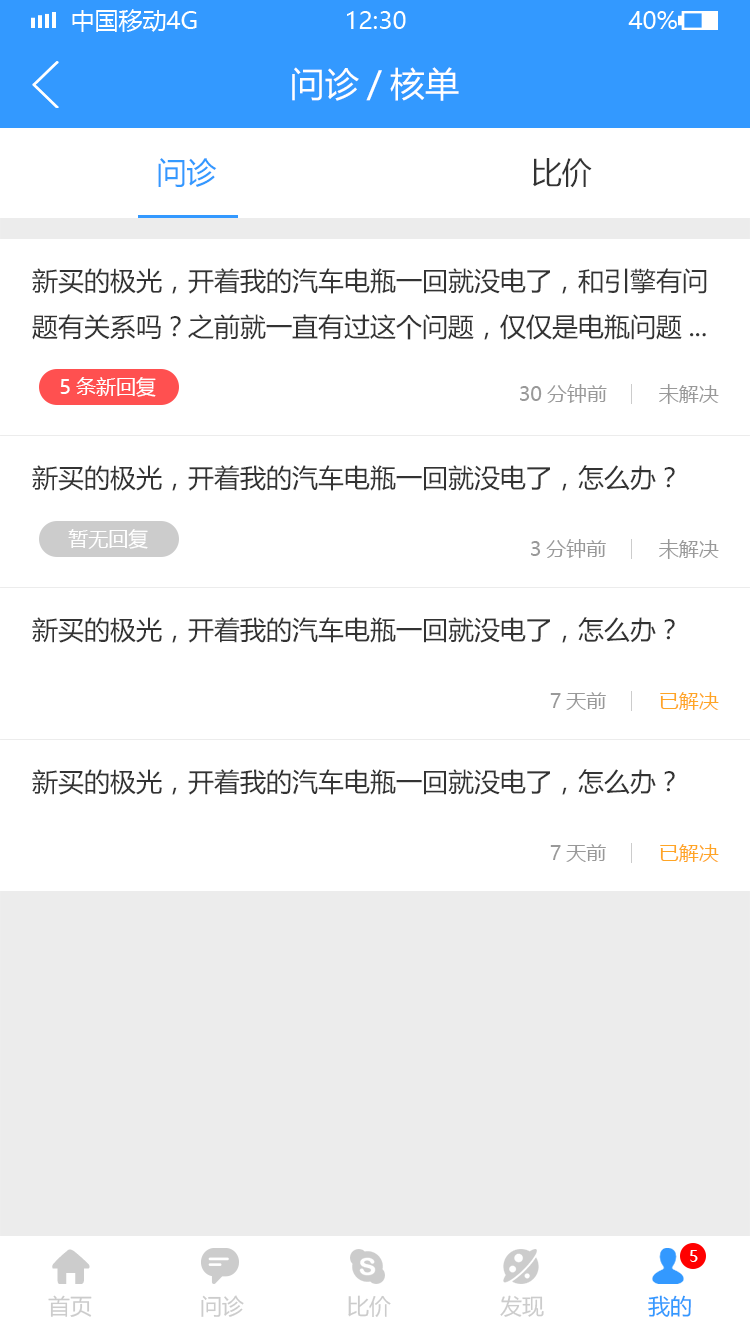
<style>
.page{position:relative;width:750px;height:1334px;background:#ffffff}
.page>*{position:absolute;margin:0}
.t1{font:34px "MicrosoftYaHei";color:#ffffff}
.t2{font:30px "MicrosoftYaHei";color:#3399ff}
.t3{font:30px "MicrosoftYaHei";color:#333333}
.t4{font:26px "MicrosoftYaHei";color:#333333}
.t5{font:20px "MicrosoftYaHei";color:#ffffff}
.t6{font:20px "MicrosoftYaHei";color:#999999}
.t7{font:26px "MicrosoftYaHei"}
.t8{font:20px "MicrosoftYaHei";color:#ffa525}
.t9{font:16px "MicrosoftYaHei";color:#ffffff}
.t10{font:22px "MicrosoftYaHei";color:#cccccc}
.t11{font:22px "MicrosoftYaHei";color:#3399ff}
</style>
<div class="page">
<p class="t1" style="left:292px;top:67px;width:167px;height:34px">问诊/核单</p>
<p class="t2" style="left:158px;top:158px;width:59px;height:29px">问诊</p>
<p class="t3" style="left:533px;top:158px;width:59px;height:30px">比价</p>
<p class="t4" style="left:32px;top:268px;width:596px;height:72px">新买的极光，开着我的汽车电瓶一回就没电了，和引<br>擎有问题有关系吗？请问我该怎么办？</p>
<p class="t4" style="left:32px;top:268px;width:675px;height:72px">新买的极光，开着我的汽车电瓶一回就没电了，和引擎有问<br>题有关系吗？之前就一直有过这个问题，仅仅是电瓶问题...</p>
<p class="t5" style="left:60px;top:377px;width:96px;height:20px">5条新回复</p>
<p class="t6" style="left:520px;top:384px;width:87px;height:19px">30分钟前</p>
<p class="t6" style="left:659px;top:384px;width:60px;height:20px">未解决</p>
<p class="t7" style="left:32px;top:465px;width:596px;height:72px">新买的极光，开着我的汽车电瓶一回就没电了，和引<br>擎有问题有关系吗？请问我该怎么办？</p>
<p class="t4" style="left:32px;top:465px;width:643px;height:26px">新买的极光，开着我的汽车电瓶一回就没电了，怎么办？</p>
<p class="t5" style="left:68px;top:529px;width:80px;height:20px">暂无回复</p>
<p class="t6" style="left:531px;top:539px;width:75px;height:19px">3分钟前</p>
<p class="t6" style="left:659px;top:539px;width:60px;height:20px">未解决</p>
<p class="t7" style="left:32px;top:617px;width:596px;height:72px">新买的极光，开着我的汽车电瓶一回就没电了，和引<br>擎有问题有关系吗？请问我该怎么办？</p>
<p class="t4" style="left:32px;top:617px;width:643px;height:26px">新买的极光，开着我的汽车电瓶一回就没电了，怎么办？</p>
<p class="t6" style="left:550px;top:692px;width:56px;height:18px">7天前</p>
<p class="t8" style="left:660px;top:692px;width:59px;height:18px">已解决</p>
<p class="t7" style="left:32px;top:769px;width:596px;height:72px">新买的极光，开着我的汽车电瓶一回就没电了，和引<br>擎有问题有关系吗？请问我该怎么办？</p>
<p class="t4" style="left:32px;top:769px;width:643px;height:26px">新买的极光，开着我的汽车电瓶一回就没电了，怎么办？</p>
<p class="t6" style="left:550px;top:844px;width:56px;height:18px">7天前</p>
<p class="t8" style="left:660px;top:844px;width:59px;height:18px">已解决</p>
<p class="t9" style="left:690px;top:1250px;width:8px;height:12px">5</p>
<p class="t10" style="left:48px;top:1295px;width:44px;height:22px">首页</p>
<p class="t10" style="left:201px;top:1295px;width:43px;height:22px">问诊</p>
<p class="t10" style="left:348px;top:1295px;width:43px;height:22px">比价</p>
<p class="t10" style="left:500px;top:1295px;width:44px;height:22px">发现</p>
<p class="t11" style="left:648px;top:1295px;width:43px;height:22px">我的</p>
</div>
